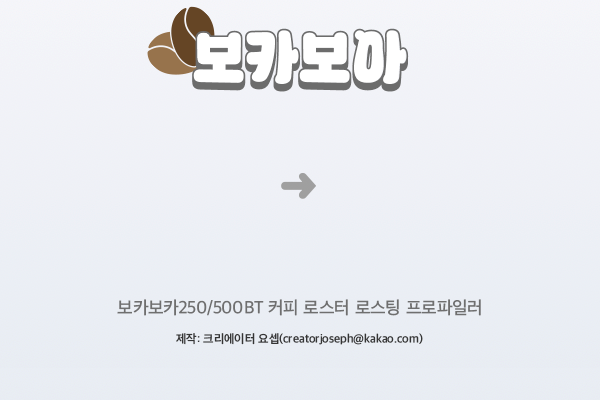
<style>
.page{position:relative;width:600px;height:400px}
.page>*{position:absolute;margin:0}
.t1{font:59.5px "KERISKEDUOTF_Line";color:#6c6c6c}
.t2{font:59.5px "KERISKEDUOTF_B";color:#ffffff}
.t3{font:18px "AppleSDGothicNeo-Medium";color:#6f6f6f}
.t4{font:12px "AppleSDGothicNeo-SemiBold";color:#353535}
</style>
<div class="page">
<p class="t1" style="left:192px;top:28px;width:217px;height:64px">보카보아</p>
<p class="t2" style="left:193px;top:30px;width:213px;height:55px">보카보아</p>
<p class="t3" style="left:117px;top:299px;width:364px;height:17px">보카보카250/500BT 커피 로스터 로스팅 프로파일러</p>
<p class="t4" style="left:176px;top:333px;width:247px;height:12px">제작: 크리에이터 요셉(creatorjoseph@kakao.com)</p>
</div>
